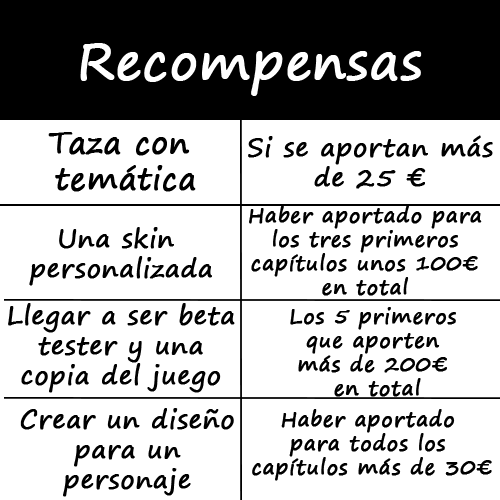
<style>
.page{position:relative;width:500px;height:500px;background:#ffffff}
.page>*{position:absolute;margin:0}
.t1{font:50px "SegoePrint";color:#ffffff;font-weight:bold}
.t2{font:30px "SegoePrint";color:#000000;font-weight:bold}
.t3{font:25px "SegoePrint";color:#000000;font-weight:bold}
.t4{font:20px "SegoePrint";color:#000000;font-weight:bold}
</style>
<div class="page">
<p class="t1" style="left:80px;top:43px;width:342px;height:53px">Recompensas</p>
<p class="t2" style="left:48px;top:132px;width:148px;height:60px;text-align:center">Taza con <br>temática</p>
<p class="t3" style="left:248px;top:135px;width:245px;height:54px;text-align:center">Si se aportan más de 25 €</p>
<p class="t4" style="left:249px;top:205px;width:233px;height:91px;text-align:center">Haber aportado para los tres primeros <br>capítulos unos 100€ en total</p>
<p class="t3" style="left:29px;top:227px;width:183px;height:59px;text-align:center">Una skin <br>personalizada</p>
<p class="t3" style="left:8px;top:303px;width:227px;height:90px;text-align:center">Llegar a ser beta tester y una copia del juego</p>
<p class="t4" style="left:290px;top:307px;width:166px;height:90px;text-align:center">Los 5 primeros <br>que aporten <br>más de 200€ <br>en total</p>
<p class="t3" style="left:20px;top:408px;width:214px;height:89px;text-align:center">Crear un diseño<br> para un <br>personaje</p>
<p class="t4" style="left:252px;top:409px;width:240px;height:72px;text-align:center">Haber aportado <br>para todos los <br>capítulos más de 30€</p>
</div>
